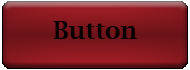
<style>
.page{position:relative;width:190px;height:70px}
.page>*{position:absolute;margin:0}
.t1{font:25px "LucidaBright-Demi";color:#000000}
</style>
<div class="page">
<p class="t1" style="left:53px;top:21px;width:84px;height:18px">Button</p>
</div>
